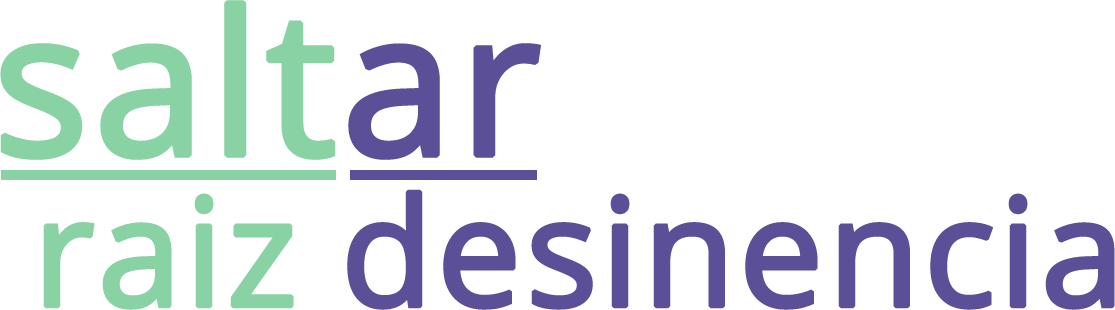
<style>
.page{position:relative;width:1115px;height:310px;background:#ffffff}
.page>*{position:absolute;margin:0}
.t1{font:200px "OpenSans-Regular";color:#88d2a3;font-weight:bold}
.t2{font:200px "OpenSans-Regular";color:#5b4f98;font-weight:bold}
.t3{font:150px "OpenSans-Regular";color:#88d2a3;font-weight:bold}
.t4{font:150px "OpenSans-Regular";color:#5b4f98;font-weight:bold}
</style>
<div class="page">
<p class="t1" style="left:0px;top:0px;width:541px;height:160px">salt<span class="t2">ar</span></p>
<p class="t3" style="left:43px;top:193px;width:251px;height:117px">raiz</p>
<p class="t4" style="left:347px;top:189px;width:768px;height:121px">desinencia</p>
</div>
